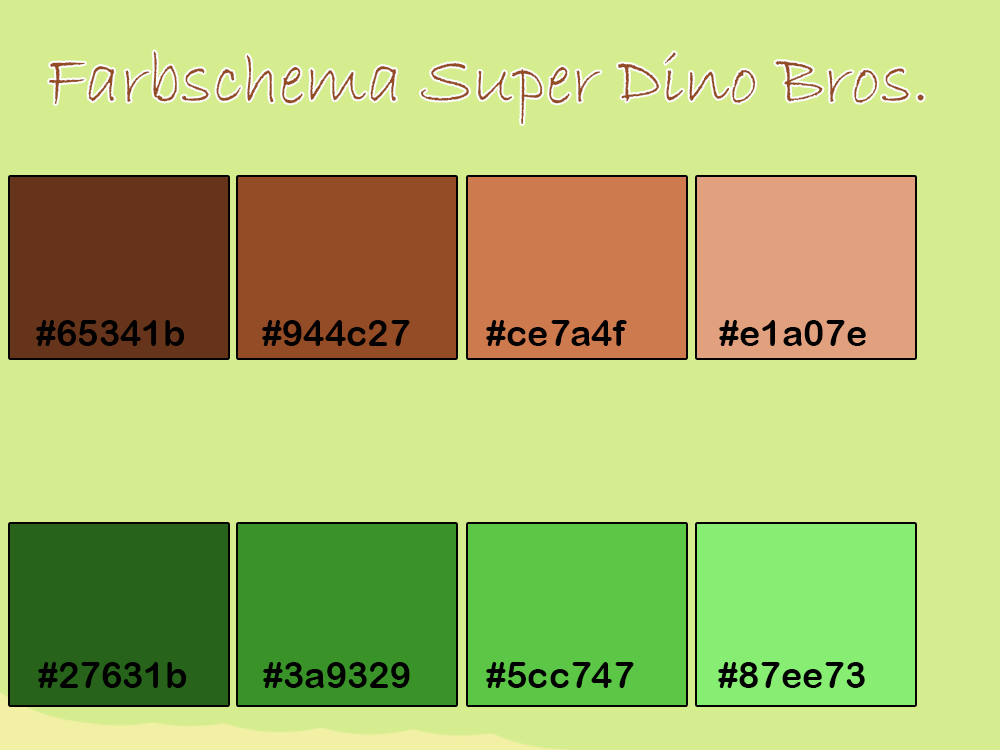
<style>
.page{position:relative;width:1000px;height:750px;background:#d5ec8f}
.page>*{position:absolute;margin:0}
.t1{font:72px "BradleyHandITC";color:#944c27}
.t2{font:36px "ArialRoundedMTBold";color:#000000}
</style>
<div class="page">
<p class="t1" style="left:49px;top:51px;width:875px;height:73px">Farbschema Super Dino Bros.</p>
<p class="t2" style="left:36px;top:320px;width:149px;height:26px">#65341b</p>
<p class="t2" style="left:262px;top:320px;width:148px;height:26px">#944c27</p>
<p class="t2" style="left:486px;top:320px;width:141px;height:26px">#ce7a4f</p>
<p class="t2" style="left:719px;top:320px;width:147px;height:26px">#e1a07e</p>
<p class="t2" style="left:38px;top:662px;width:149px;height:26px">#27631b</p>
<p class="t2" style="left:263px;top:662px;width:147px;height:26px">#3a9329</p>
<p class="t2" style="left:486px;top:662px;width:148px;height:26px">#5cc747</p>
<p class="t2" style="left:718px;top:662px;width:147px;height:26px">#87ee73</p>
</div>
